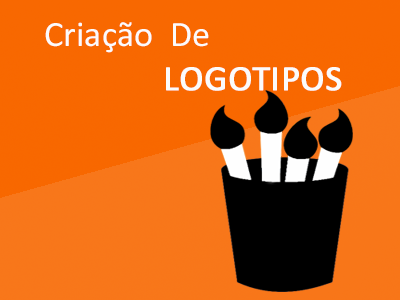
<style>
.page{position:relative;width:400px;height:300px}
.page>*{position:absolute;margin:0}
.t1{font:36px "Calibri";letter-spacing:0.005em;color:#fbfbfb}
.t2{font:36px "Calibri";letter-spacing:0.005em;color:#fbfbfb;text-transform:uppercase;font-weight:bold}
</style>
<div class="page">
<p class="t1" style="left:45px;top:22px;width:297px;height:69px;text-align:center">Criação  De<br>        <span class="t2">logotipos</span></p>
</div>
